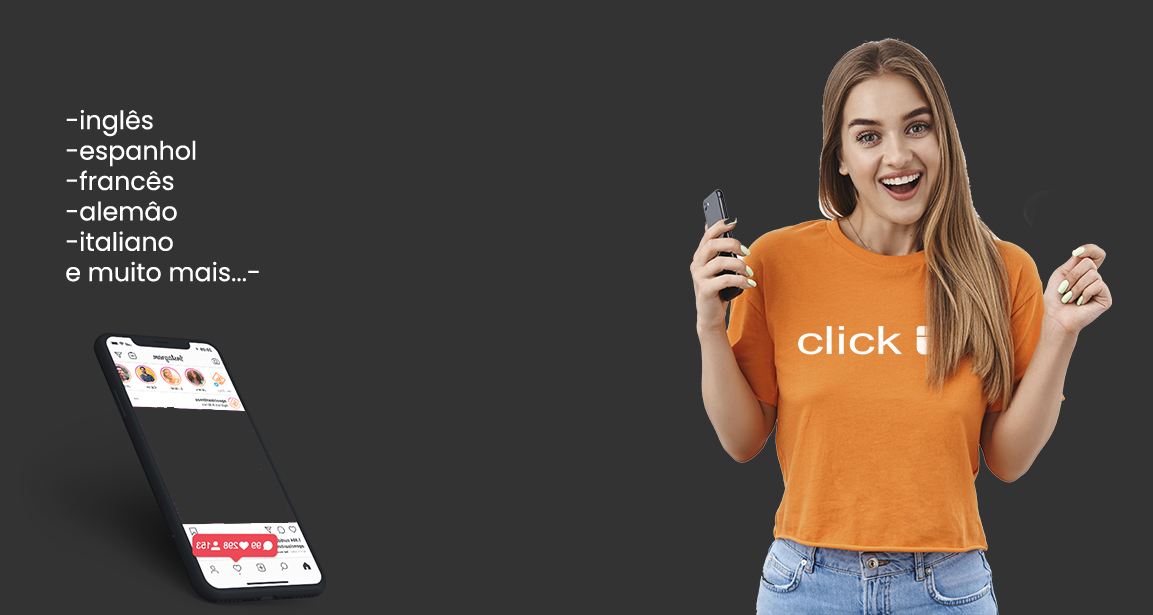
<style>
.page{position:relative;width:1153px;height:615px;background:#333333}
.page>*{position:absolute;margin:0}
.t1{font:25.3px "Poppins-Regular";color:#ffffff}
</style>
<div class="page">
<p class="t1" style="left:66px;top:109px;width:193px;height:173px">-inglês<br>-espanhol<br>-francês<br>-alemâo<br>-italiano<br>e muito mais...-</p>
</div>
